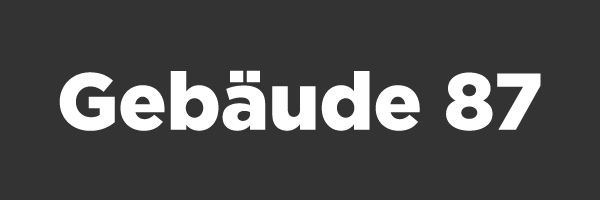
<style>
.page{position:relative;width:600px;height:200px;background:#333333}
.page>*{position:absolute;margin:0}
.t1{font:80px "Gotham-Black";color:#ffffff}
</style>
<div class="page">
<p class="t1" style="left:59px;top:70px;width:482px;height:61px">Gebäude 87</p>
</div>
